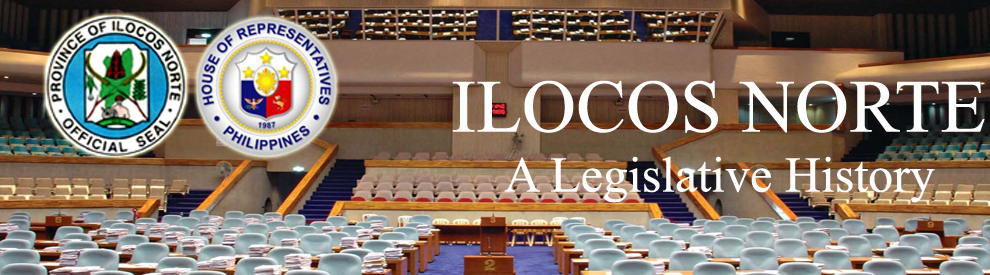
<style>
.page{position:relative;width:990px;height:275px}
.page>*{position:absolute;margin:0}
.t1{font:50px "TimesNewRomanPSMT";color:#fdfcfc}
.t2{font:75px "TimesNewRomanPSMT";color:#fdfdfd}
</style>
<div class="page">
<p class="t1" style="left:452px;top:80px;width:533px;height:123px;text-align:center"><span class="t2">ILOCOS NORTE<br></span>A Legislative History</p>
</div>
